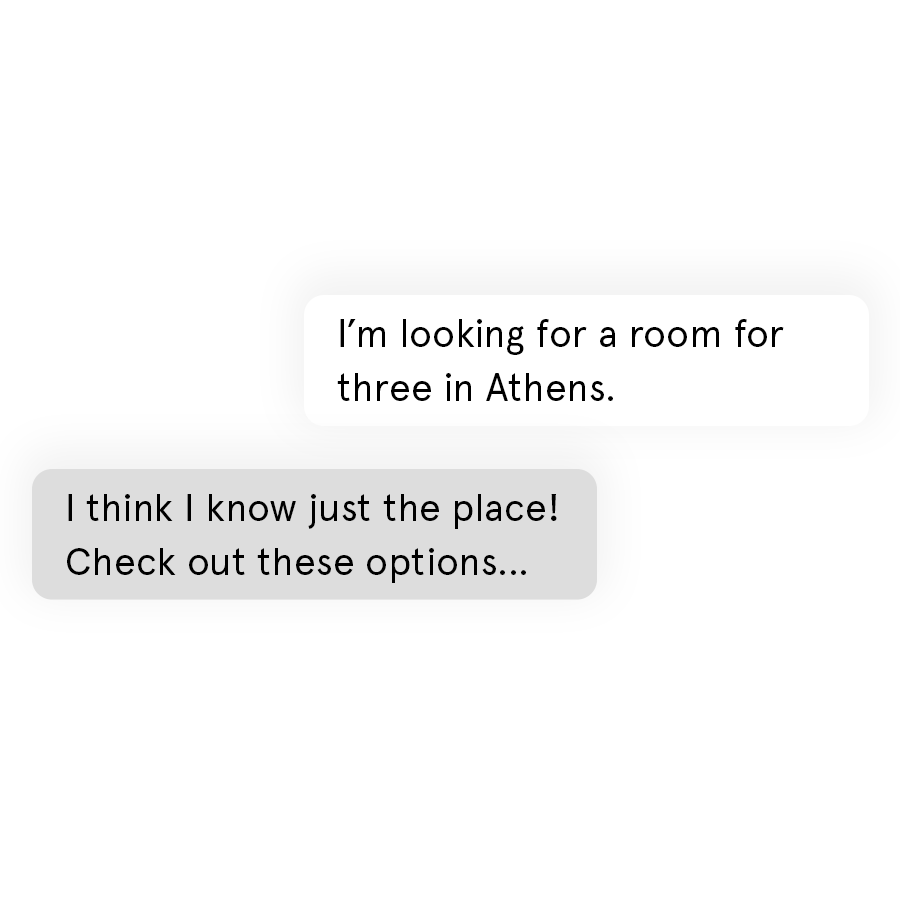
<style>
.page{position:relative;width:900px;height:900px;background:#ffffff}
.page>*{position:absolute;margin:0}
.t1{font:66.7px "ApercuPro";color:#000000}
.t2{font:66.5px "ApercuPro";color:#000000}
</style>
<div class="page">
<p class="t1" style="left:337px;top:319px;width:447px;height:82px">I’m looking for a room for three in Athens.</p>
<p class="t2" style="left:67px;top:494px;width:490px;height:89px">I think I know just the place! Check out these options…</p>
</div>
